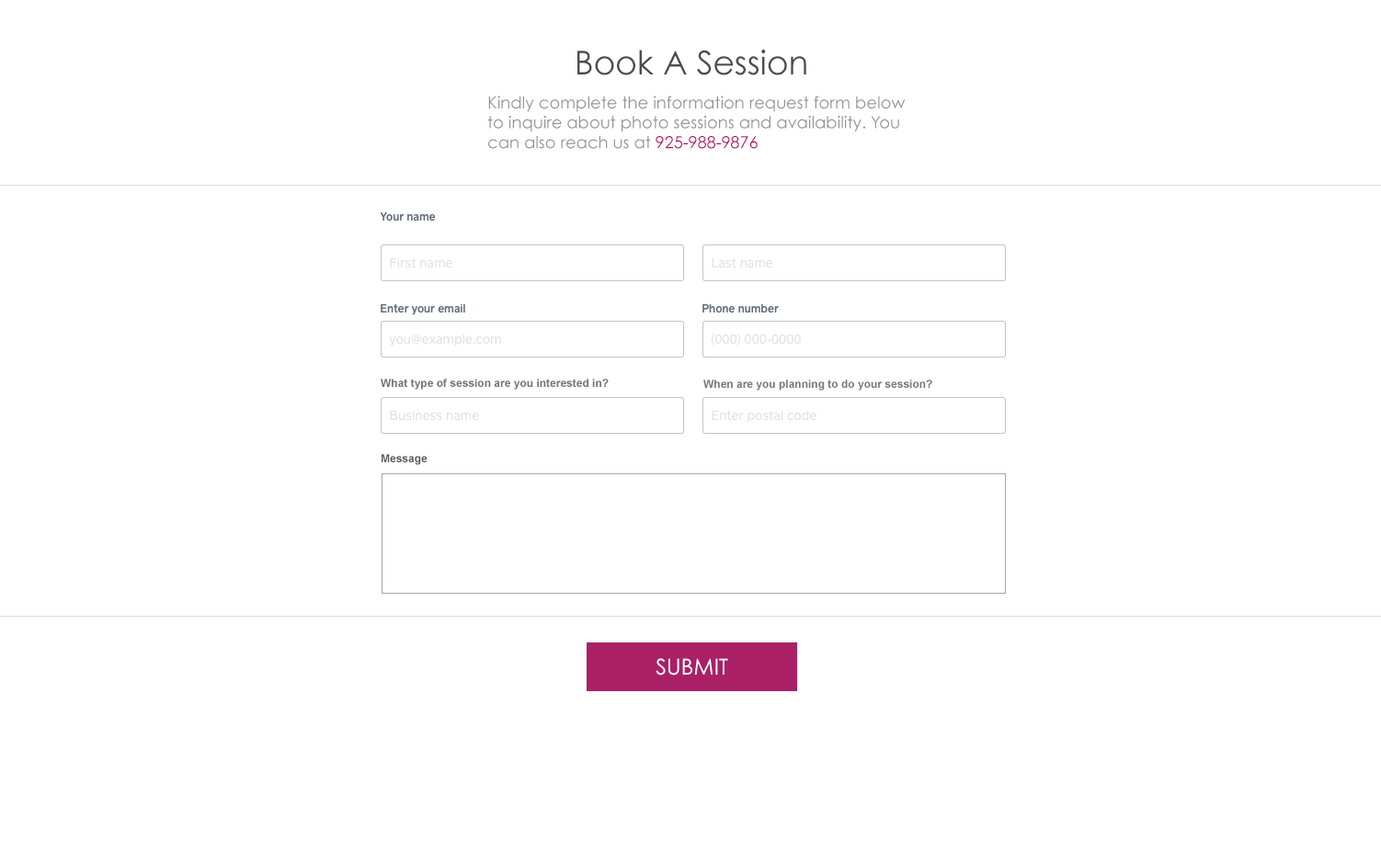
<style>
.page{position:relative;width:1381px;height:863px;background:#ffffff}
.page>*{position:absolute;margin:0}
.t1{font:33.1px "CenturyGothic";color:#4c4c4c}
.t2{font:16.6px "CenturyGothic";color:#939393}
.t3{font:16.6px "CenturyGothic";color:#b5035f}
.t4{font:11px "Arial-BoldMT";color:#727272}
.t5{font:11px "Arial-BoldMT";color:#797879}
.t6{font:11px "Arial-BoldMT";color:#595858}
.t7{font:22.1px "CenturyGothic";color:#ffffff}
</style>
<div class="page">
<p class="t1" style="left:577px;top:50px;width:229px;height:25px">Book A Session</p>
<p class="t2" style="left:487px;top:96px;width:419px;height:53px">Kindly complete the information request form below<br>to inquire about photo sessions and availability. You <br>can also reach us at <span class="t3">925-988-9876</span></p>
<p class="t4" style="left:381px;top:379px;width:228px;height:11px">What type of session are you interested in?</p>
<p class="t5" style="left:703px;top:380px;width:229px;height:11px">When are you planning to do your session?</p>
<p class="t6" style="left:382px;top:454px;width:46px;height:11px">Message</p>
<p class="t7" style="left:656px;top:658px;width:72px;height:18px">SUBMIT</p>
</div>
